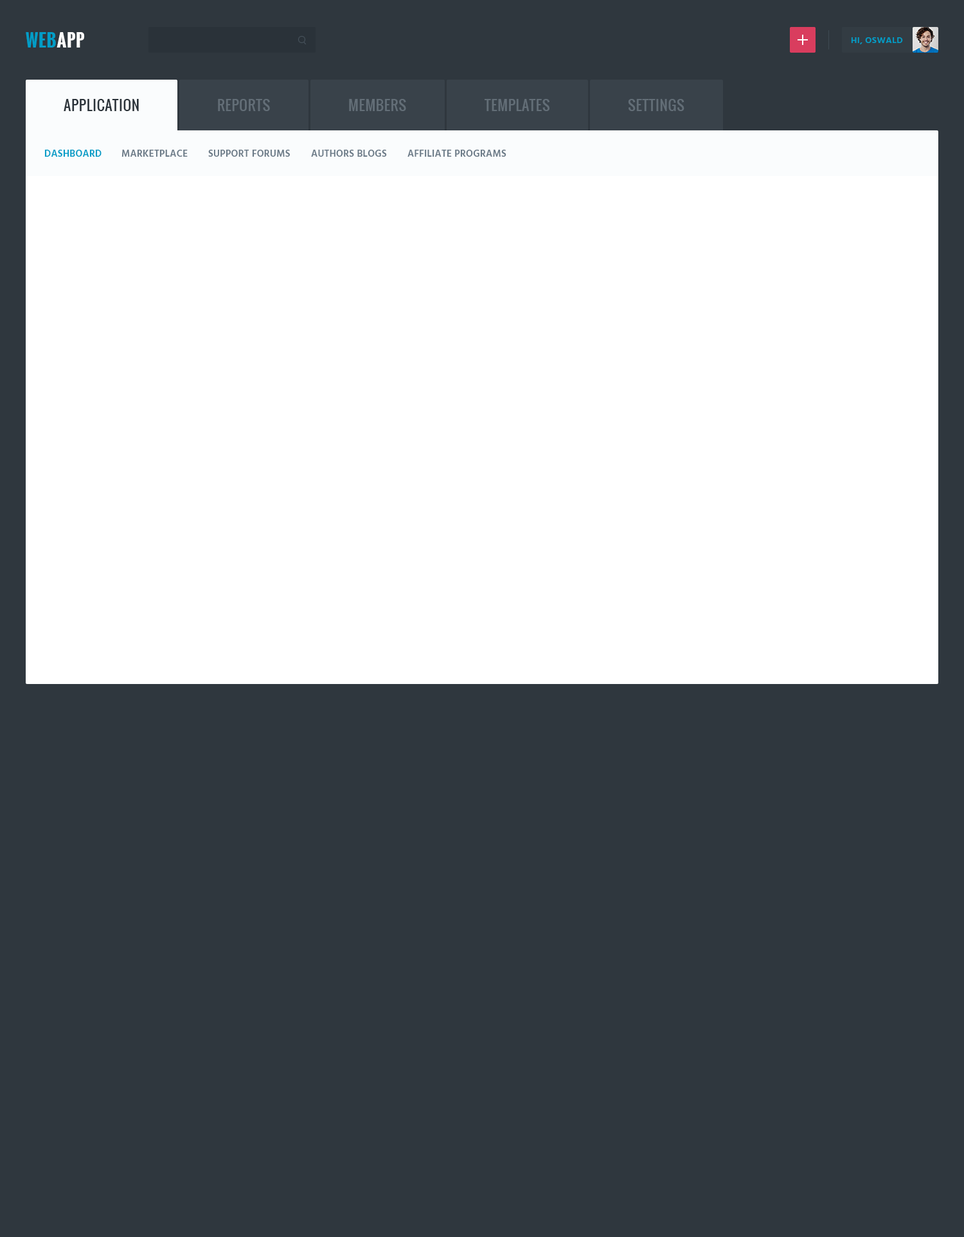
<style>
.page{position:relative;width:964px;height:1237px;background:#2f373e}
.page>*{position:absolute;margin:0}
.t1{font:17.3px "Oswald-Bold";letter-spacing:0.03em;color:#009dc7;text-transform:uppercase}
.t2{font:17.3px "Oswald-Bold";letter-spacing:0.03em;color:#ffffff;text-transform:uppercase}
.t3{font:9px "Hind-Semibold";letter-spacing:0.03em;color:#009dc7}
.t4{font:14.1px "Oswald-Regular";letter-spacing:0.03em;color:#2a3239;text-transform:uppercase}
.t5{font:14.1px "Oswald-Regular";letter-spacing:0.03em;color:#636e77;text-transform:uppercase}
.t6{font:9.6px "Hind-Semibold";letter-spacing:0.02em;color:#009dc7;text-transform:uppercase}
.t7{font:9.6px "Hind-Semibold";letter-spacing:0.02em;color:#6c7b88;text-transform:uppercase}
</style>
<div class="page">
<p class="t1" style="left:26px;top:32px;width:59px;height:16px">Web<span class="t2">App</span></p>
<p class="t3" style="left:851px;top:37px;width:52px;height:7px">HI, OSWALD</p>
<p class="t4" style="left:64px;top:99px;width:75px;height:12px">APPLICATION</p>
<p class="t5" style="left:218px;top:99px;width:52px;height:12px">REPORTS</p>
<p class="t5" style="left:349px;top:99px;width:57px;height:12px">MEMBERS</p>
<p class="t5" style="left:484px;top:99px;width:65px;height:12px">TEMPLATES</p>
<p class="t5" style="left:628px;top:99px;width:56px;height:12px">SETTINGS</p>
<p class="t6" style="left:44px;top:150px;width:58px;height:7px">DASHBOARD</p>
<p class="t7" style="left:121px;top:150px;width:67px;height:7px">MARKETPLACE</p>
<p class="t7" style="left:208px;top:150px;width:82px;height:7px">SUPPORT FORUMS</p>
<p class="t7" style="left:311px;top:150px;width:76px;height:7px">AUTHORS BLOGS</p>
<p class="t7" style="left:407px;top:150px;width:99px;height:7px">affiliate programs</p>
</div>
